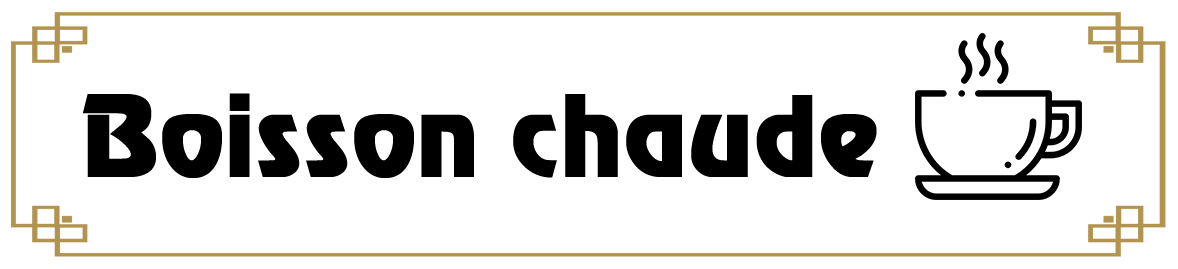
<style>
.page{position:relative;width:1178px;height:269px;background:#ffffff}
.page>*{position:absolute;margin:0}
.t1{font:110px "Revenue";color:#000000}
</style>
<div class="page">
<p class="t1" style="left:83px;top:93px;width:794px;height:85px">Boisson chaude</p>
</div>
